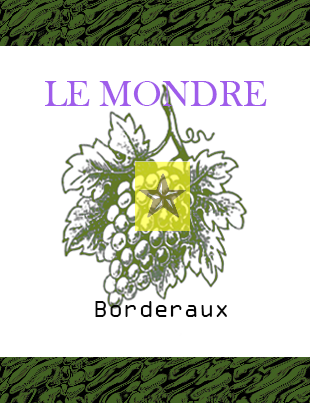
<style>
.page{position:relative;width:310px;height:403px;background:#ffffff}
.page>*{position:absolute;margin:0}
.t1{font:37.2px "BaskOldFace";color:#9f5ceb}
.t2{font:25.1px "OCRAExtended";color:#060606}
</style>
<div class="page">
<p class="t1" style="left:45px;top:81px;width:222px;height:25px">LE MONDRE</p>
<p class="t2" style="left:95px;top:301px;width:132px;height:16px">Borderaux</p>
</div>
